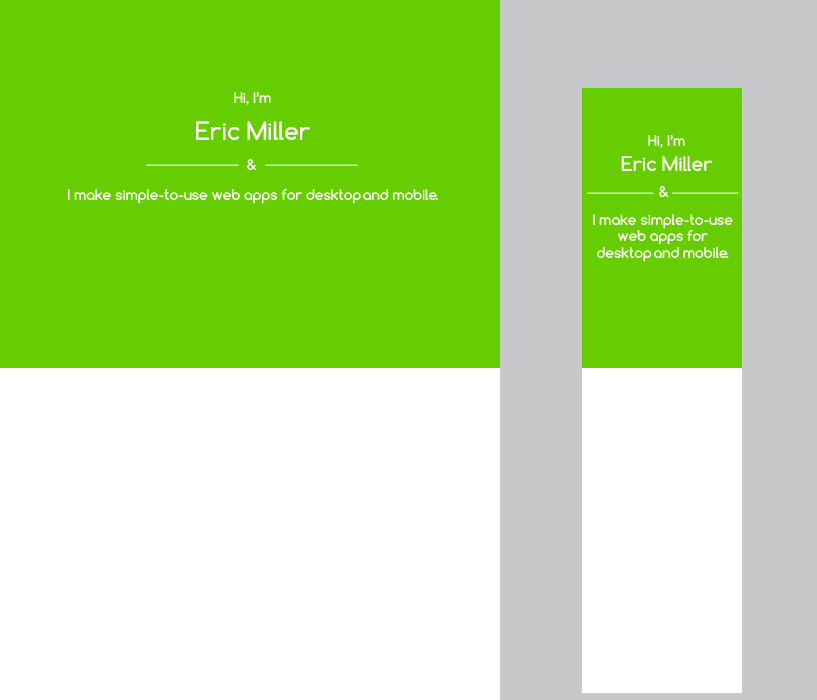
<style>
.page{position:relative;width:817px;height:700px;background:#66cd00}
.page>*{position:absolute;margin:0}
.t1{font:14px "Comfortaa-Bold";color:#ffffff}
.t2{font:24px "Comfortaa-Bold";color:#ffffff}
.t3{font:19px "Comfortaa-Bold";color:#ffffff}
</style>
<div class="page">
<p class="t1" style="left:234px;top:92px;width:37px;height:13px">Hi, I’m</p>
<p class="t2" style="left:196px;top:121px;width:114px;height:19px">Eric Miller</p>
<p class="t1" style="left:648px;top:135px;width:37px;height:13px">Hi, I’m</p>
<p class="t1" style="left:247px;top:158px;width:9px;height:13px">&amp;</p>
<p class="t3" style="left:621px;top:156px;width:91px;height:16px">Eric Miller</p>
<p class="t1" style="left:659px;top:185px;width:9px;height:13px">&amp;</p>
<p class="t1" style="left:67px;top:189px;width:371px;height:15px">I make simple-to-use web apps for desktop and mobile.</p>
<p class="t1" style="left:593px;top:214px;width:140px;height:48px;text-align:center">I make simple-to-use<br>web apps for<br>desktop and mobile.</p>
</div>
